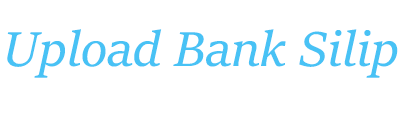
<style>
.page{position:relative;width:400px;height:120px;background:#ffffff}
.page>*{position:absolute;margin:0}
.t1{font:54px "SitkaHeading-Italic";color:#48c2f5}
</style>
<div class="page">
<p class="t1" style="left:7px;top:29px;width:391px;height:49px">Upload Bank Silip</p>
</div>
